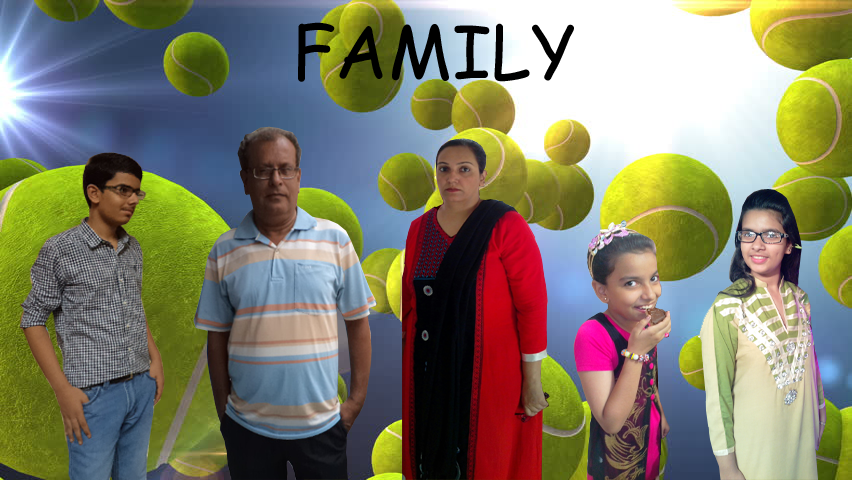
<style>
.page{position:relative;width:852px;height:480px}
.page>*{position:absolute;margin:0}
.t1{font:72px "ComicSansMS";color:#000000}
</style>
<div class="page">
<p class="t1" style="left:298px;top:22px;width:276px;height:60px">FAMILY</p>
</div>
